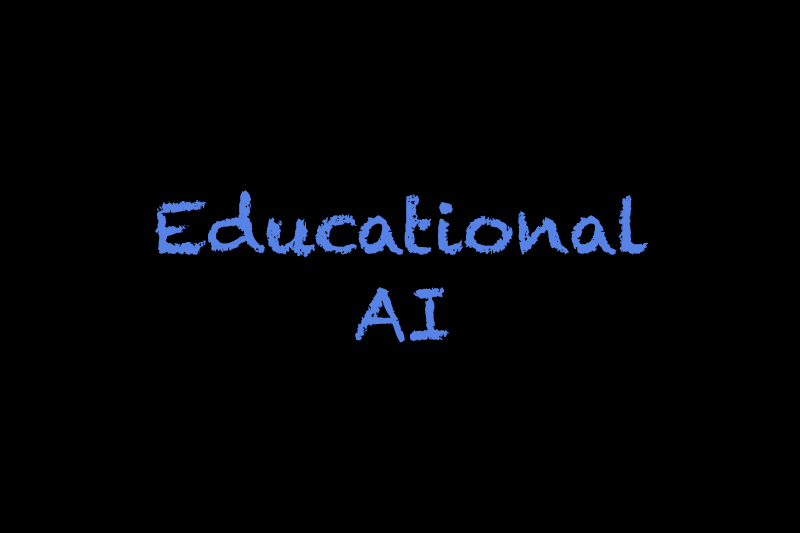
<style>
.page{position:relative;width:800px;height:533px;background:#000000}
.page>*{position:absolute;margin:0}
.t1{font:72px "Chalkduster";color:#5783e6}
</style>
<div class="page">
<p class="t1" style="left:155px;top:190px;width:493px;height:153px;text-align:center">Educational<br>AI</p>
</div>
